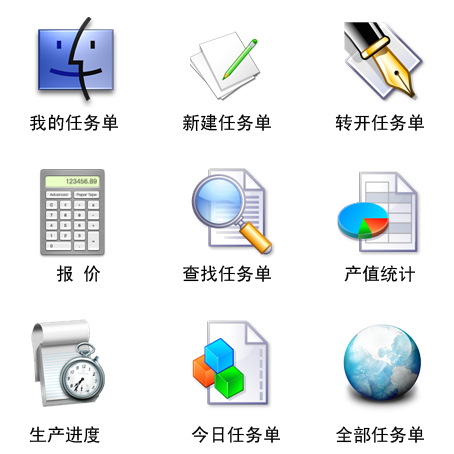
<style>
.page{position:relative;width:454px;height:454px;background:#ffffff}
.page>*{position:absolute;margin:0}
.t1{font:18px "SimHei";color:#000000}
</style>
<div class="page">
<p class="t1" style="left:29px;top:114px;width:395px;height:329px">我的任务单       新建任务单       转开任务单<br><br><br><br><br><br><br>    报 价         查找任务单        产值统计<br><br><br><br><br><br><br><br> 生产进度          今日任务单      全部任务单</p>
</div>
